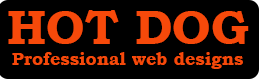
<style>
.page{position:relative;width:259px;height:79px;background:#000000}
.page>*{position:absolute;margin:0}
.t1{font:18px "BookmanOldStyle-Bold";color:#f6490a}
.t2{font:48px "BookmanOldStyle-Bold";color:#f6490a}
</style>
<div class="page">
<p class="t1" style="left:8px;top:10px;width:241px;height:59px;text-align:center"><span class="t2">HOT DOG<br></span>Professional web designs</p>
</div>
